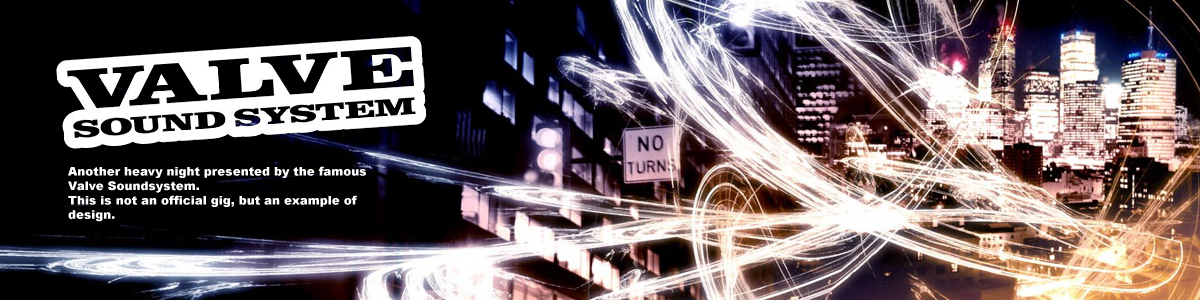
<style>
.page{position:relative;width:1200px;height:300px;background:#000000}
.page>*{position:absolute;margin:0}
.t1{font:12px "Arial-Black";color:#ffffff}
</style>
<div class="page">
<p class="t1" style="left:68px;top:166px;width:298px;height:56px">Another heavy night presented by the famous Valve Soundsystem.<br>This is not an official gig, but an example of design.</p>
</div>
